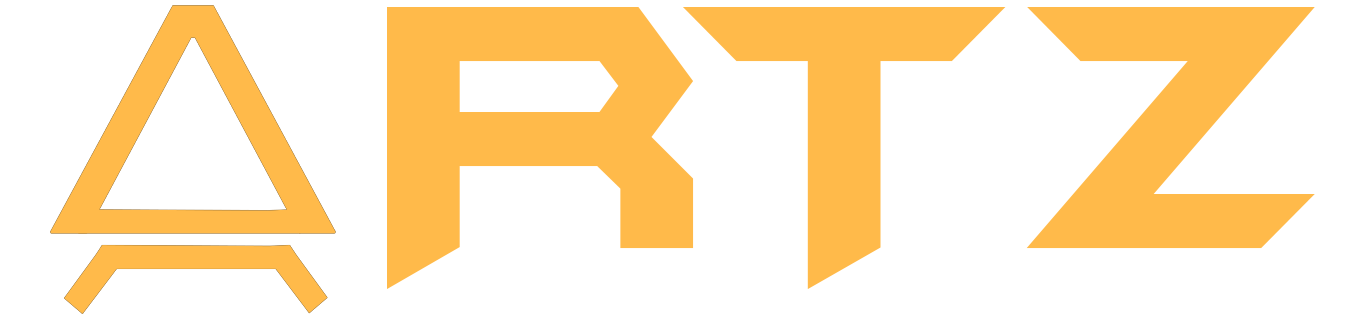
<style>
.page{position:relative;width:1364px;height:316px;background:#ffffff}
.page>*{position:absolute;margin:0}
.t1{font:408px "BatmanForeverAlternate";color:#ffba4a}
</style>
<div class="page">
<p class="t1" style="left:387px;top:7px;width:928px;height:282px">RTZ</p>
</div>
